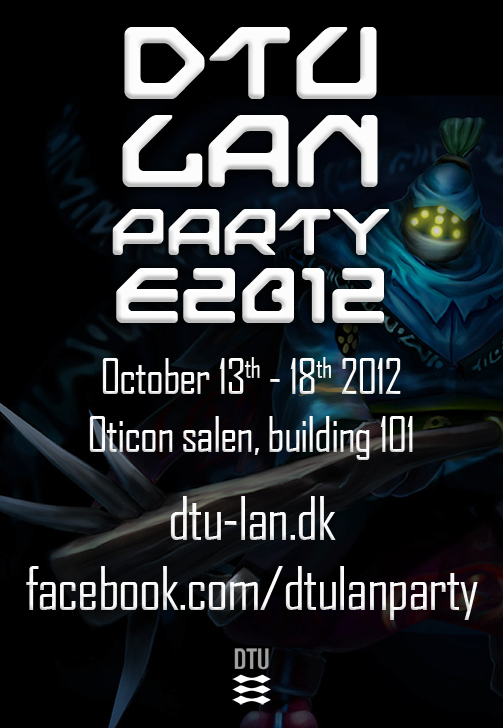
<style>
.page{position:relative;width:503px;height:728px;background:#000000}
.page>*{position:absolute;margin:0}
.t1{font:106.9px/87.5px "NextGames";letter-spacing:-0.025em;color:#fcfcfc}
.t2{font:68.1px/68.1px "NextGames";letter-spacing:-0.025em;color:#fcfcfc}
.t3{font:82.6px/68.1px "NextGames";letter-spacing:-0.025em;color:#fcfcfc}
.t4{font:46.7px/58.4px "AgencyFB-Reg";letter-spacing:-0.025em;color:#fcfcfc}
.t5{font:58.4px "AgencyFB-Reg";letter-spacing:-0.025em;color:#fcfcfc}
.t6{font:58.4px "AgencyFB-Reg";letter-spacing:-0.025em;color:#ffffff}
</style>
<div class="page">
<p class="t1" style="left:112px;top:27px;width:278px;height:296px;text-align:center">DTU<br>LAN<br><span class="t2">PARTY<br></span><span class="t3">E2012</span></p>
<p class="t4" style="left:89px;top:357px;width:324px;height:103px;text-align:center">October 13th - 18th 2012<br>Oticon salen, building 101</p>
<p class="t5" style="left:26px;top:496px;width:452px;height:124px;text-align:center">dtu-lan.dk<br>facebook.com<span class="t6">/</span>dtulanparty</p>
</div>
